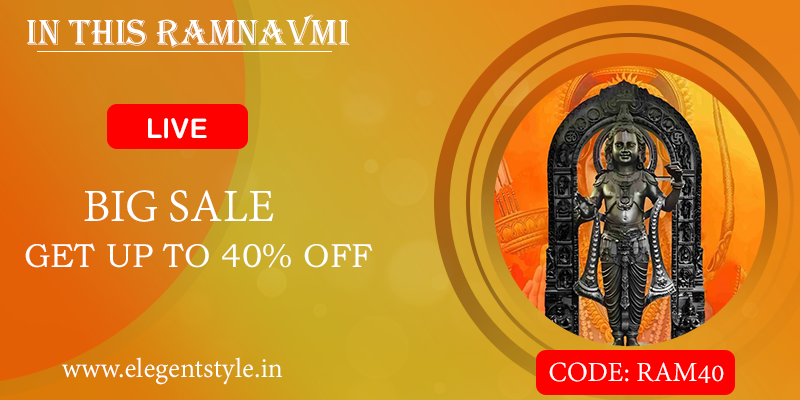
<style>
.page{position:relative;width:800px;height:400px}
.page>*{position:absolute;margin:0}
.t1{font:37.5px "Algerian";color:#ffffff}
.t2{font:27.1px "ArialRoundedMTBold";color:#ffffff}
.t3{font:50px "AdobeDevanagari-Regular";color:#ffffff}
.t4{font:33.3px "BookmanOldStyle";color:#ffffff}
.t5{font:30px "AdobeDevanagari-Regular";color:#ffffff}
</style>
<div class="page">
<p class="t1" style="left:26px;top:14px;width:324px;height:34px">in this ramnavmi</p>
<p class="t2" style="left:148px;top:118px;width:59px;height:21px">LIVE</p>
<p class="t3" style="left:84px;top:190px;width:190px;height:32px">BIG SALE</p>
<p class="t4" style="left:25px;top:243px;width:348px;height:25px">GET UP TO 40% OFF</p>
<p class="t5" style="left:62px;top:357px;width:220px;height:28px">www.elegentstyle.in</p>
<p class="t5" style="left:549px;top:362px;width:175px;height:21px">CODE: RAM40</p>
</div>
